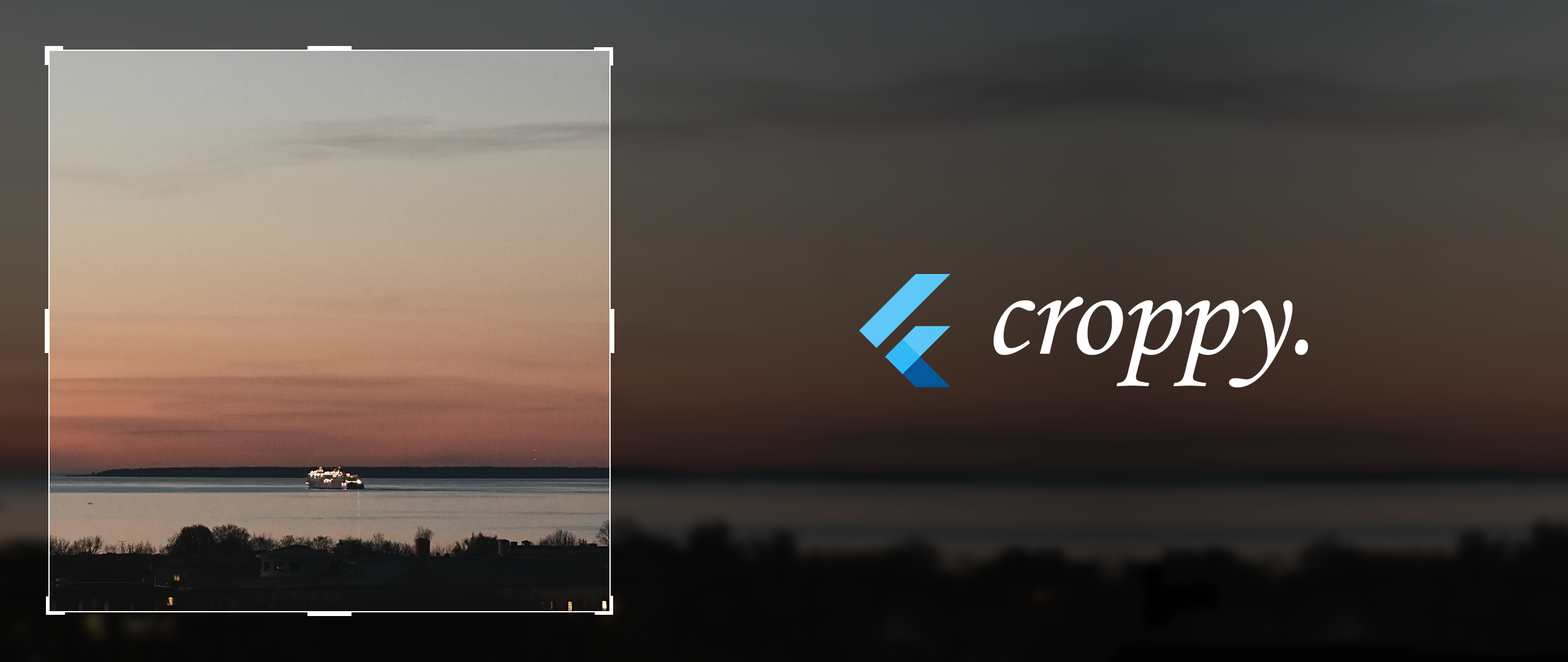
<style>
.page{position:relative;width:1568px;height:662px}
.page>*{position:absolute;margin:0}
.t1{font:130.7px "MonotypeCorsiva";color:#ffffff}
</style>
<div class="page">
<p class="t1" style="left:993px;top:296px;width:315px;height:91px">croppy.</p>
</div>
